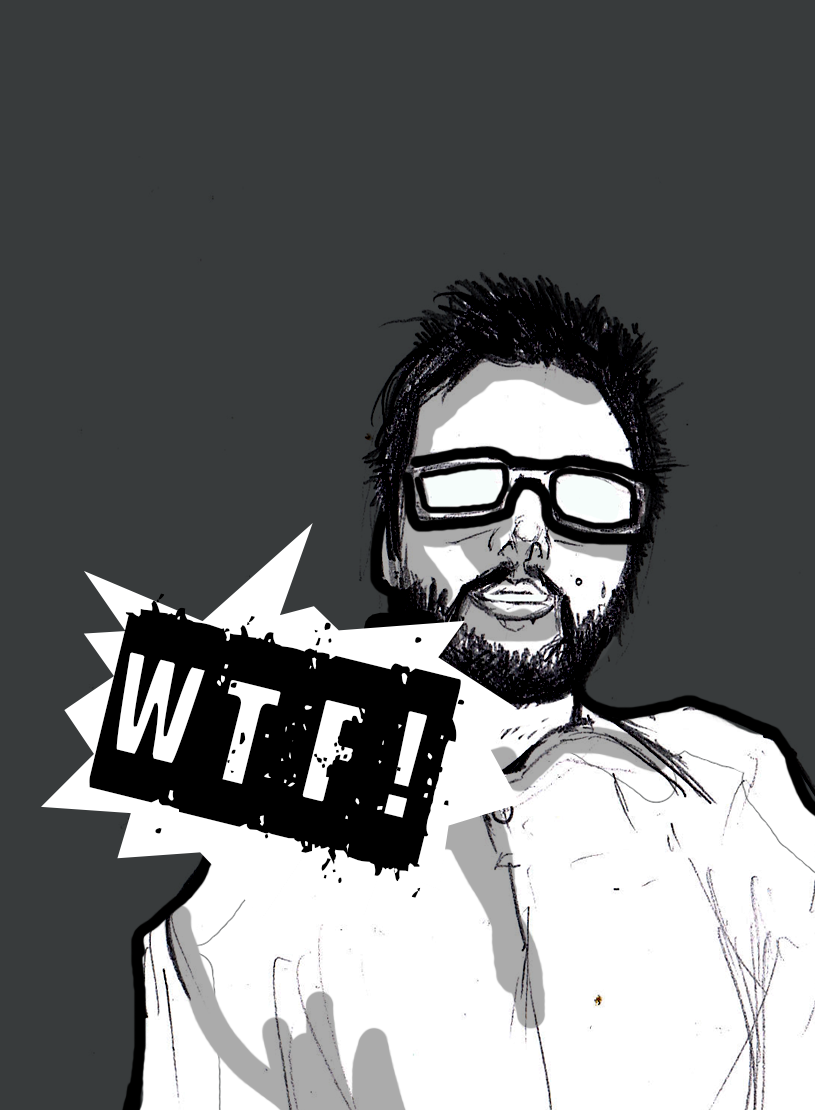
<style>
.page{position:relative;width:815px;height:1110px;background:#383b3c}
.page>*{position:absolute;margin:0}
.t1{font:375px "DistortYouALesson";color:#000000;font-variant:small-caps}
.t2{font:270.8px "DistortYouALesson";color:#000000;font-variant:small-caps}
</style>
<div class="page">
<p class="t1" style="left:89px;top:593px;width:376px;height:305px;rotate:14deg">wtf<span class="t2">!</span></p>
</div>
